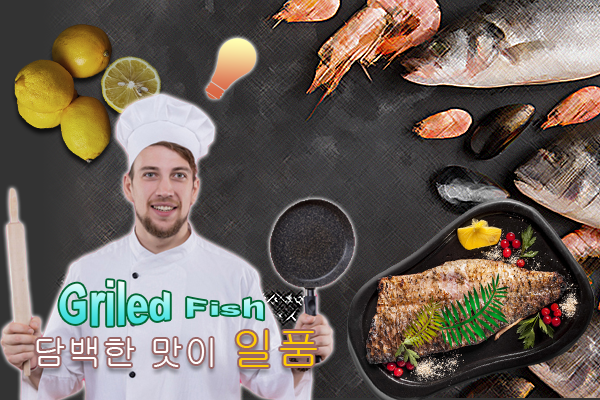
<style>
.page{position:relative;width:600px;height:400px}
.page>*{position:absolute;margin:0}
.t1{font:40px "Arial-BoldMT"}
.t2{font:35px "Gulim";color:#ffffff}
.t3{font:45px "Gulim";color:#ffcc00}
</style>
<div class="page">
<p class="t1" style="left:59px;top:280px;width:205px;height:46px">Griled Fish</p>
<p class="t2" style="left:36px;top:330px;width:281px;height:37px">담백한 맛이 <span class="t3">일품</span></p>
</div>
